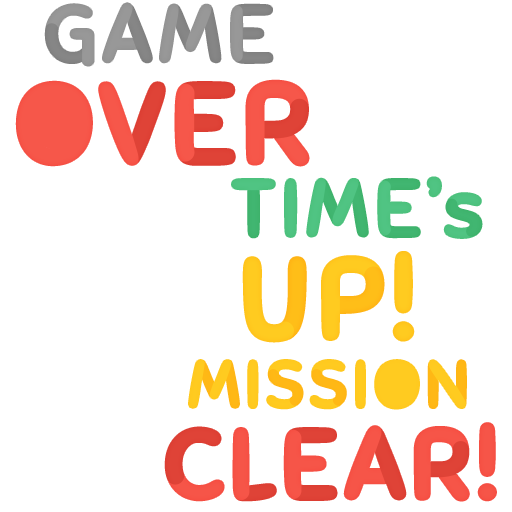
<style>
.page{position:relative;width:512px;height:512px;background:#ffffff}
.page>*{position:absolute;margin:0}
.t1{font:78.5px "Sniglet-Regular";letter-spacing:0.06em;color:#959595;font-weight:bold;scale:1.06 1}
.t2{font:109.2px "Sniglet-Regular";letter-spacing:0.06em;color:#f6574a;text-transform:uppercase;font-weight:bold;scale:1.05 1}
.t3{font:78.5px "Sniglet-Regular";letter-spacing:0.06em;color:#4ec280;text-transform:uppercase;font-weight:bold;scale:1.06 1}
.t4{font:78.5px "Sniglet-Regular";letter-spacing:0.06em;color:#4ec280;font-weight:bold;scale:1.06 1}
.t5{font:109.2px "Sniglet-Regular";letter-spacing:0.06em;color:#ffcb20;text-transform:uppercase;font-weight:bold;scale:1.05 1}
.t6{font:64.8px "Sniglet-Regular";letter-spacing:0.06em;color:#ffca1f;text-transform:uppercase;font-weight:bold;scale:1.06 1}
.t7{font:94.6px "Sniglet-Regular";letter-spacing:0.06em;text-transform:uppercase;font-weight:bold;scale:1.05 1}
</style>
<div class="page">
<p class="t1" style="left:45px;top:3px;width:228px;height:63px">GAME</p>
<p class="t2" style="left:17px;top:81px;width:291px;height:84px">over</p>
<p class="t3" style="left:232px;top:177px;width:250px;height:61px">Time<span class="t4">’s</span></p>
<p class="t5" style="left:244px;top:253px;width:169px;height:88px">UP!</p>
<p class="t6" style="left:189px;top:360px;width:277px;height:49px">Mission</p>
<p class="t7" style="left:166px;top:424px;width:329px;height:76px">CLEAR!</p>
</div>
